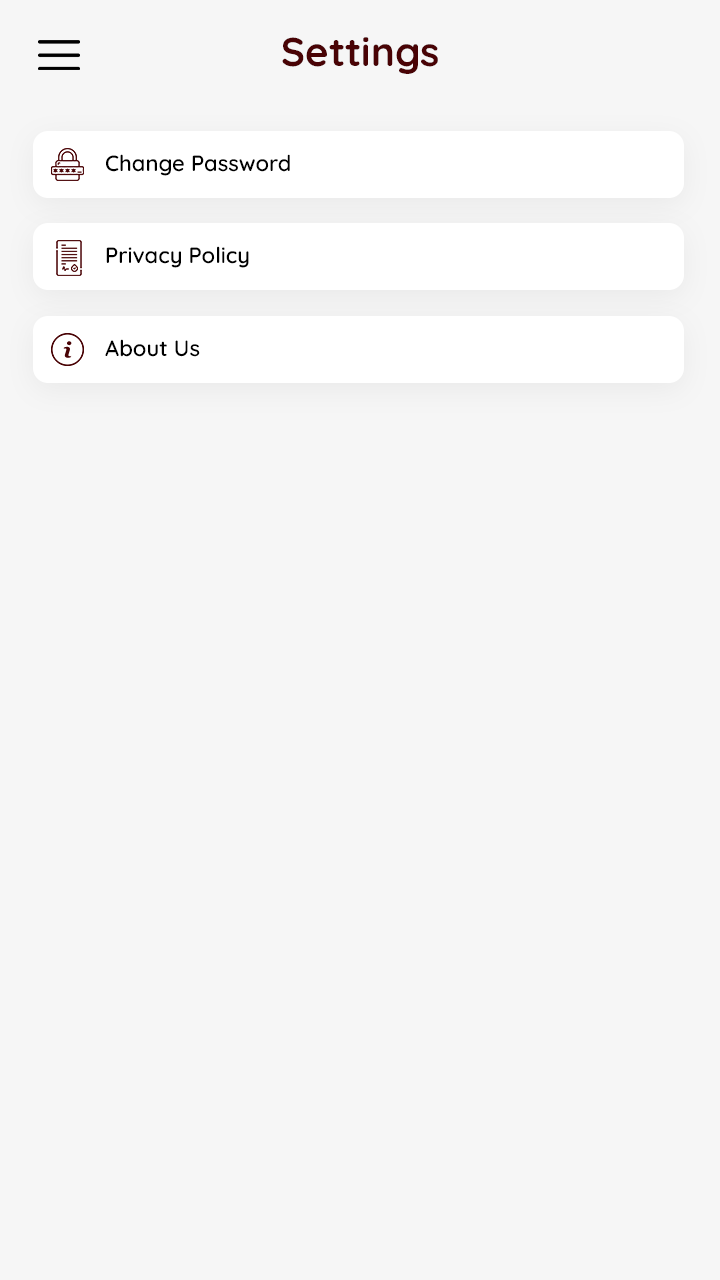
<style>
.page{position:relative;width:720px;height:1280px;background:#f6f6f6}
.page>*{position:absolute;margin:0}
.t1{font:40px "Quicksand-Bold";color:#490305}
.t2{font:22px "Quicksand-SemiBold";color:#000000}
</style>
<div class="page">
<p class="t1" style="left:282px;top:37px;width:156px;height:37px">Settings</p>
<p class="t2" style="left:106px;top:154px;width:184px;height:22px">Change Password</p>
<p class="t2" style="left:106px;top:246px;width:143px;height:22px">Privacy Policy</p>
<p class="t2" style="left:105px;top:339px;width:95px;height:18px">About Us</p>
</div>
